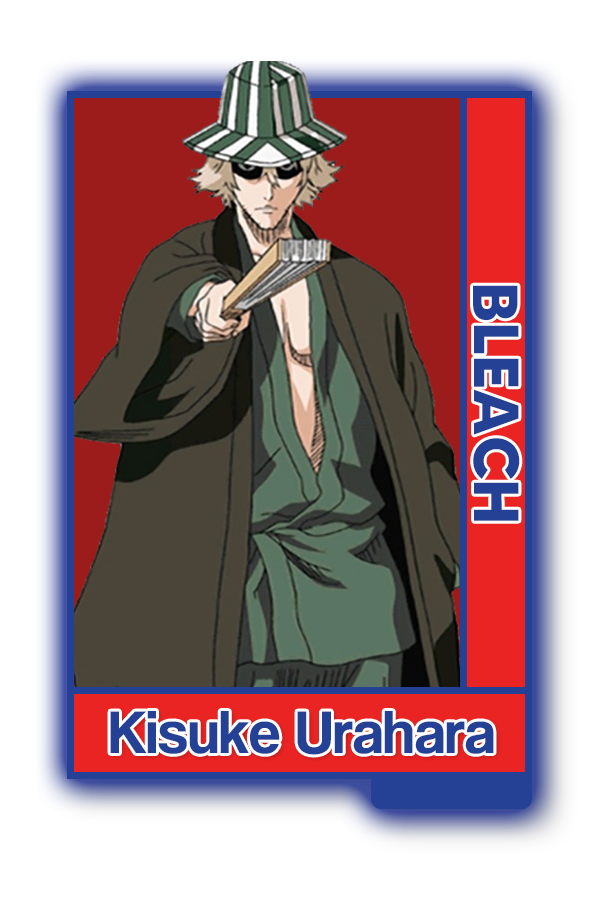
<style>
.page{position:relative;width:600px;height:900px;background:#ffffff}
.page>*{position:absolute;margin:0}
.t1{font:63.6px "MADETOMMY-Bold";color:#254195}
.t2{font:62.5px "CoolveticaRg-Regular";color:#254195}
</style>
<div class="page">
<p class="t1" style="left:473px;top:285px;width:47px;height:236px;rotate:90deg">BLEACH</p>
<p class="t2" style="left:110px;top:711px;width:384px;height:44px">Kisuke Urahara</p>
</div>
